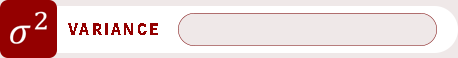
<style>
.page{position:relative;width:458px;height:58px;background:#efe8e8}
.page>*{position:absolute;margin:0}
.t1{font:17.7px "WorkSansRoman-Bold";letter-spacing:0.15em;color:#940000;scale:0.82 1}
</style>
<div class="page">
<p class="t1" style="left:68px;top:23px;width:90px;height:12px">VARIANCE</p>
</div>
